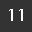
<style>
.page{position:relative;width:32px;height:32px;background:#333333}
.page>*{position:absolute;margin:0}
.t1{font:17.8px "MyriadPro-Regular";color:#ffffff;scale:1.12 1}
</style>
<div class="page">
<p class="t1" style="left:9px;top:9px;width:14px;height:12px">11</p>
</div>
